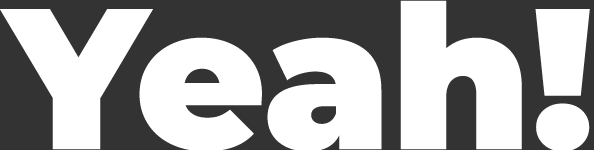
<style>
.page{position:relative;width:594px;height:150px;background:#ffffff}
.page>*{position:absolute;margin:0}
.t1{font:200px "Montserrat-Black";color:#ffffff}
</style>
<div class="page">
<p class="t1" style="left:0px;top:0px;width:590px;height:152px">Yeah!</p>
</div>
